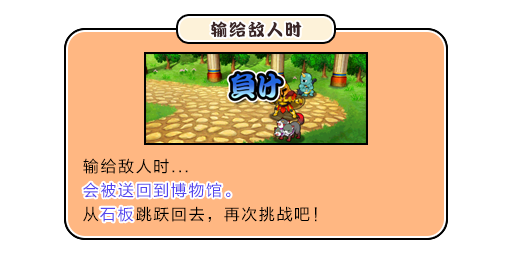
<style>
.page{position:relative;width:512px;height:256px;background:#ffffff}
.page>*{position:absolute;margin:0}
.t1{font:17px "DFPKanTingLiuW9";letter-spacing:0.1em;color:#3b2626}
.t2{font:16px/24px "FZLTHJW--GB1-0";letter-spacing:0.1em;color:#000000}
.t3{font:16px/24px "FZLTHJW--GB1-0";letter-spacing:0.1em;color:#5444ed}
.t4{font:16px "FZLTHJW--GB1-0";letter-spacing:0.1em;color:#5444ed}
</style>
<div class="page">
<p class="t1" style="left:210px;top:21px;width:92px;height:17px">输给敌人时</p>
<p class="t2" style="left:83px;top:158px;width:234px;height:64px">输给敌人时...<br><span class="t3">会被送回到博物馆。<br></span>从<span class="t3">石板</span>跳跃回去，再次挑战吧！</p>
<p class="t4" style="left:83px;top:182px;width:148px;height:16px">会被送回到博物馆。</p>
<p class="t4" style="left:100px;top:206px;width:33px;height:16px">石板</p>
</div>
